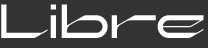
<style>
.page{position:relative;width:208px;height:48px;background:#333333}
.page>*{position:absolute;margin:0}
.t1{font:48px "BaunkRegular";color:#ffffff}
</style>
<div class="page">
<p class="t1" style="left:1px;top:4px;width:203px;height:34px">Libre</p>
</div>
